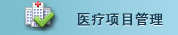
<style>
.page{position:relative;width:178px;height:35px}
.page>*{position:absolute;margin:0}
.t1{font:14px "SimHei";letter-spacing:0.015em;font-weight:bold}
.t2{font:14px "SimHei";letter-spacing:0.015em;color:#133d53;font-weight:bold}
</style>
<div class="page">
<p class="t1" style="left:77px;top:13px;width:86px;height:14px">医疗项目管理</p>
<p class="t2" style="left:77px;top:12px;width:86px;height:14px">医疗项目管理</p>
</div>
